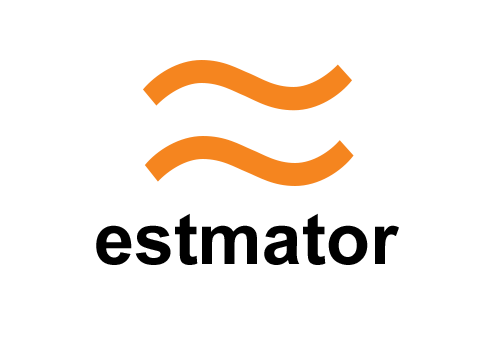
<style>
.page{position:relative;width:504px;height:360px;background:#ffffff}
.page>*{position:absolute;margin:0}
.t1{font:382px "MyriadPro-Regular";color:#f6861f}
.t2{font:72px "Arial-BoldMT";color:#000000}
</style>
<div class="page">
<p class="t1" style="left:143px;top:60px;width:211px;height:126px">≈</p>
<p class="t2" style="left:96px;top:213px;width:303px;height:52px">estmator</p>
</div>
